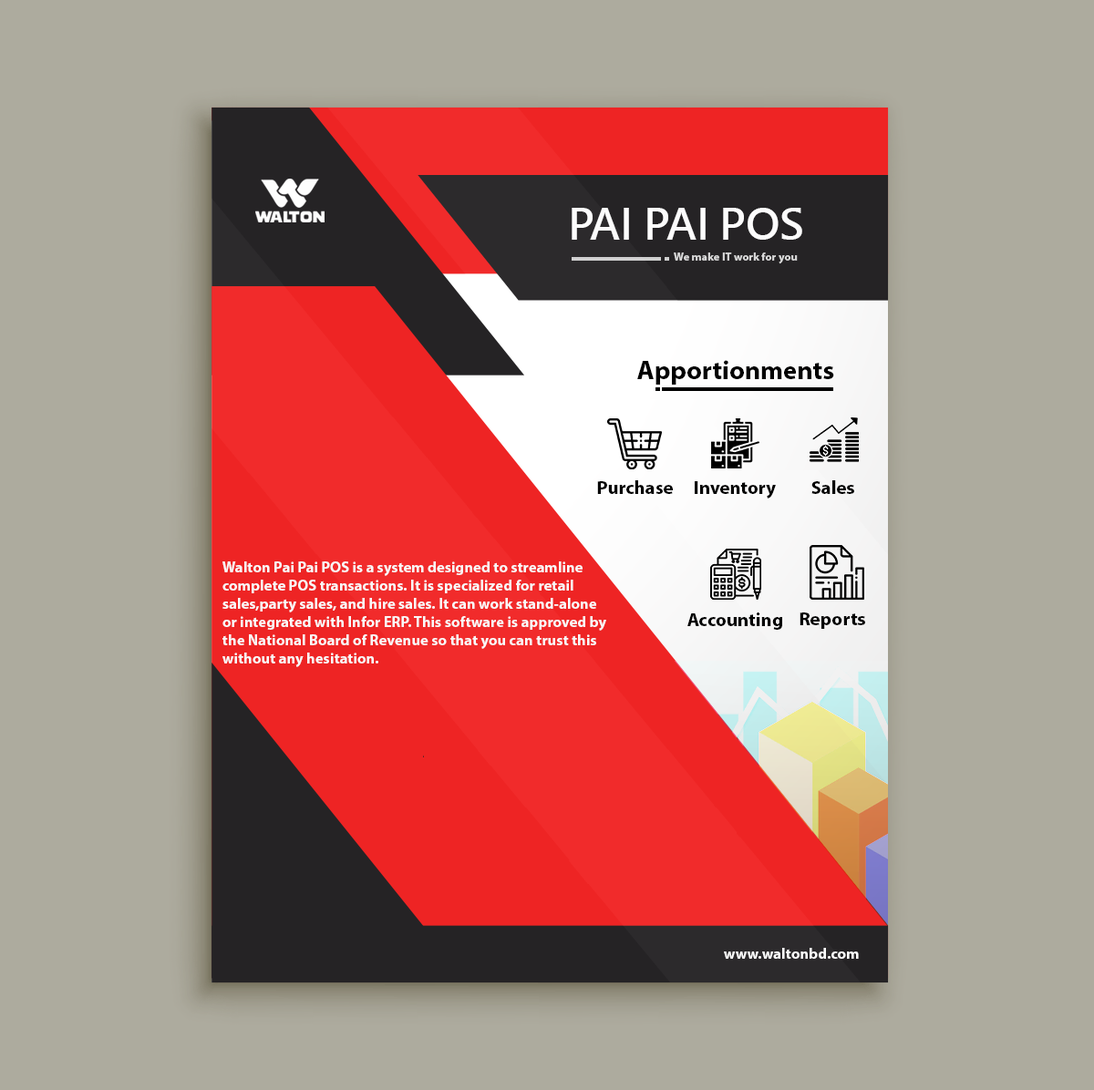
<style>
.page{position:relative;width:1094px;height:1090px;background:#adab9e}
.page>*{position:absolute;margin:0}
.t1{font:41.8px "MicrosoftJhengHeiBold";color:#fcfcfc}
.t2{font:11.4px "MyriadPro-Bold";color:#dadada}
.t3{font:26.6px "MyriadPro-Bold";color:#000000}
.t4{font:19px "MyriadPro-Bold";color:#000000}
.t5{font:15.2px "MyriadPro-Bold";color:#f9f9f9}
.t6{font:15.2px "MyriadPro-Bold";color:#fcfcfc}
</style>
<div class="page">
<p class="t1" style="left:572px;top:208px;width:230px;height:32px">PAI PAI POS</p>
<p class="t2" style="left:674px;top:252px;width:124px;height:12px">We make IT work for you</p>
<p class="t3" style="left:637px;top:360px;width:197px;height:25px">Apportionments</p>
<p class="t4" style="left:597px;top:480px;width:76px;height:14px">Purchase</p>
<p class="t4" style="left:695px;top:481px;width:81px;height:18px">Inventory</p>
<p class="t4" style="left:811px;top:480px;width:43px;height:14px">Sales</p>
<p class="t5" style="left:222px;top:561px;width:384px;height:106px">Walton Pai Pai POS is a system designed to streamline <br>complete POS transactions. It is specialized for retail<br>sales,party sales, and hire sales. It can work stand-alone<br>or integrated with Infor ERP. This software is approved by<br>the National Board of Revenue so that you can trust this <br>without any hesitation.</p>
<p class="t4" style="left:687px;top:613px;width:95px;height:17px">Accounting</p>
<p class="t4" style="left:799px;top:613px;width:66px;height:16px">Reports</p>
<p class="t6" style="left:724px;top:948px;width:135px;height:11px">www.waltonbd.com</p>
</div>
